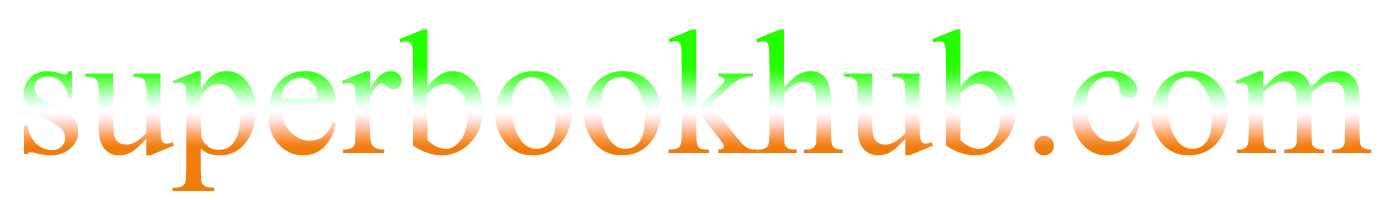
<style>
.page{position:relative;width:1400px;height:200px;background:#ffffff}
.page>*{position:absolute;margin:0}
.t1{font:177.6px "TimesNewRomanPSMT"}
</style>
<div class="page">
<p class="t1" style="left:23px;top:29px;width:1349px;height:162px">superbookhub.com</p>
</div>
